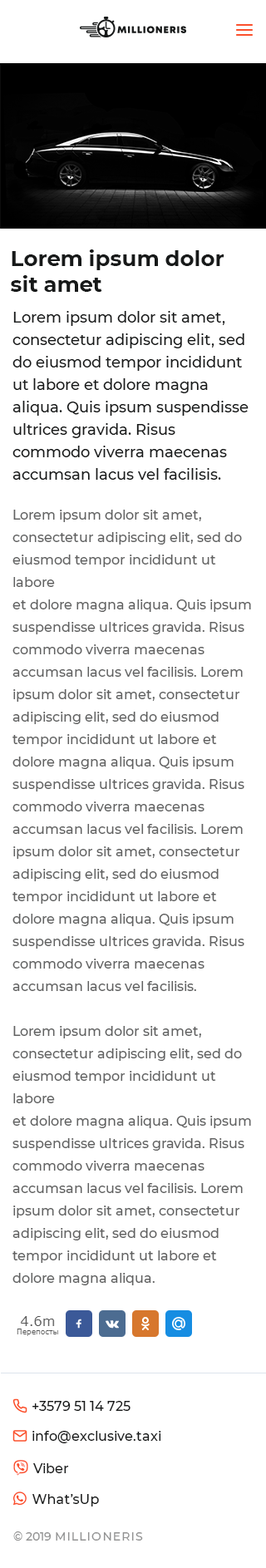
<style>
.page{position:relative;width:266px;height:1568px;background:#ffffff}
.page>*{position:absolute;margin:0}
.t1{font:21.6px "Montserrat-Bold";color:#171919}
.t2{font:15px/22.4px "Montserrat-Medium";color:#171919}
.t3{font:13.3px/22.4px "Montserrat-Medium";color:#616161}
.t4{font:13.3px "Montserrat-Medium";color:#171919}
.t5{font:11.6px "Montserrat-Medium";letter-spacing:0.1em;color:#929292}
.t6{font:11.6px "Montserrat-Medium";color:#929292}
</style>
<div class="page">
<p class="t1" style="left:11px;top:249px;width:213px;height:43px">Lorem ipsum dolor <br>sit amet</p>
<p class="t2" style="left:12px;top:311px;width:237px;height:169px">Lorem ipsum dolor sit amet, consectetur adipiscing elit, sed do eiusmod tempor incididunt ut labore et dolore magna aliqua. Quis ipsum suspendisse ultrices gravida. Risus commodo viverra maecenas accumsan lacus vel facilisis.</p>
<p class="t3" style="left:12px;top:510px;width:239px;height:775px">Lorem ipsum dolor sit amet, consectetur adipiscing elit, sed do eiusmod tempor incididunt ut labore <br>et dolore magna aliqua. Quis ipsum suspendisse ultrices gravida. Risus commodo viverra maecenas accumsan lacus vel facilisis. Lorem ipsum dolor sit amet, consectetur adipiscing elit, sed do eiusmod tempor incididunt ut labore et dolore magna aliqua. Quis ipsum suspendisse ultrices gravida. Risus commodo viverra maecenas accumsan lacus vel facilisis. Lorem ipsum dolor sit amet, consectetur adipiscing elit, sed do eiusmod tempor incididunt ut labore et dolore magna aliqua. Quis ipsum suspendisse ultrices gravida. Risus commodo viverra maecenas accumsan lacus vel facilisis. <br>Lorem ipsum dolor sit amet, consectetur adipiscing elit, sed do eiusmod tempor incididunt ut labore <br>et dolore magna aliqua. Quis ipsum suspendisse ultrices gravida. Risus commodo viverra maecenas accumsan lacus vel facilisis. Lorem ipsum dolor sit amet, consectetur adipiscing elit, sed do eiusmod tempor incididunt ut labore et dolore magna aliqua.</p>
<p class="t4" style="left:32px;top:1401px;width:99px;height:10px">+3579 51 14 725</p>
<p class="t4" style="left:32px;top:1431px;width:129px;height:12px">info@exclusive.taxi</p>
<p class="t5" style="left:13px;top:1531px;width:130px;height:10px"><span class="t6">© 2019 </span>MILLIONERIS</p>
</div>
